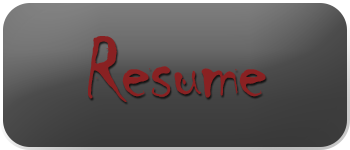
<style>
.page{position:relative;width:350px;height:150px}
.page>*{position:absolute;margin:0}
.t1{font:89.9px "Chiller-Regular";letter-spacing:-0.025em;color:#892122}
</style>
<div class="page">
<p class="t1" style="left:88px;top:36px;width:178px;height:66px">Resume</p>
</div>
